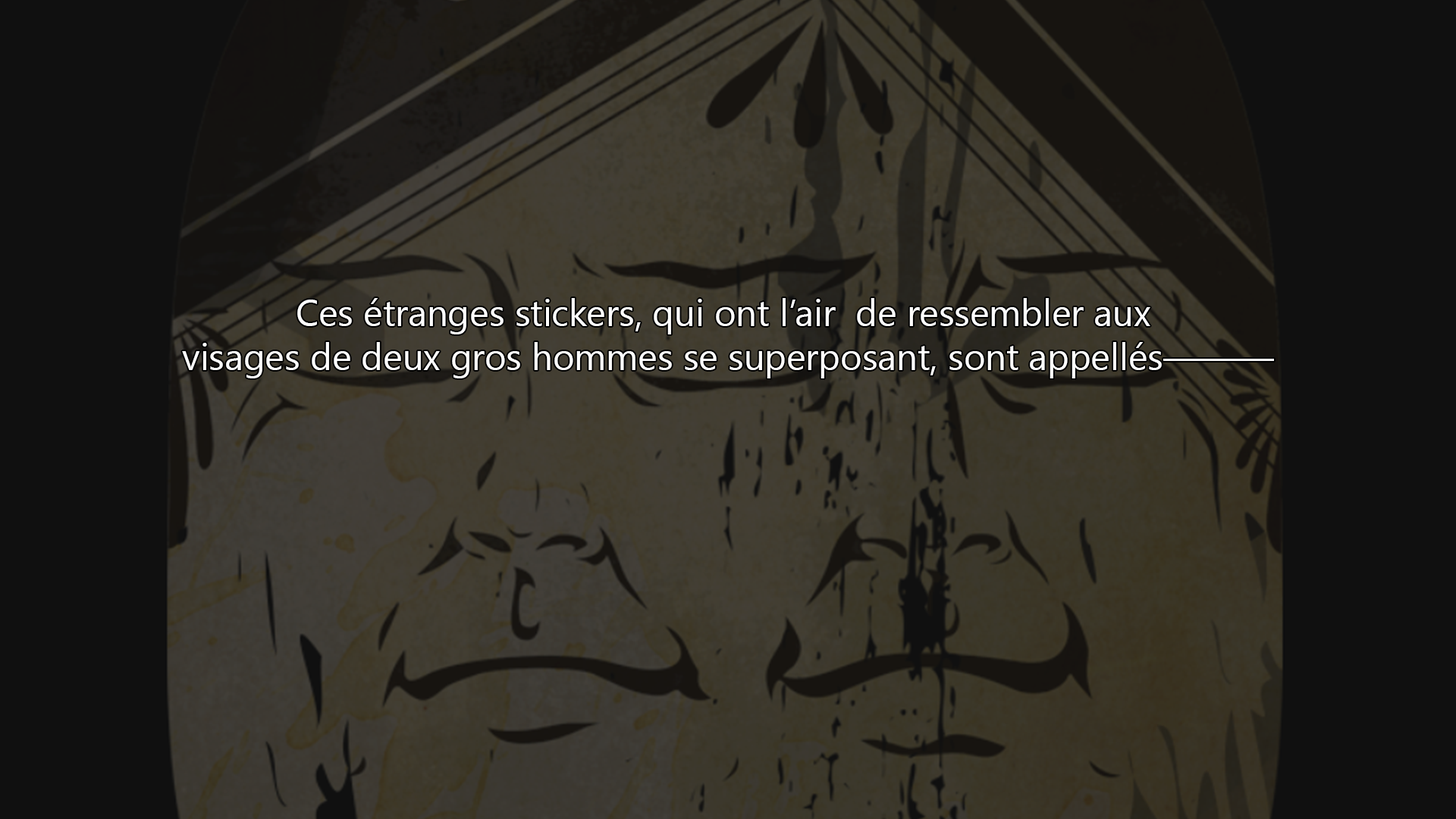
<style>
.page{position:relative;width:1456px;height:819px;background:#101010}
.page>*{position:absolute;margin:0}
.t1{font:36.9px "SegoeUIHistoric";color:#ffffff}
</style>
<div class="page">
<p class="t1" style="left:182px;top:298px;width:1092px;height:80px;text-align:center">Ces étranges stickers, qui ont l’air  de ressembler aux <br>visages de deux gros hommes se superposant, sont appellés———</p>
</div>
